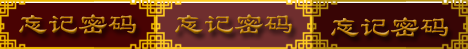
<style>
.page{position:relative;width:468px;height:49px}
.page>*{position:absolute;margin:0}
.t1{font:30px "LiSu"}
</style>
<div class="page">
<p class="t1" style="left:19px;top:14px;width:118px;height:20px">忘记密码</p>
<p class="t1" style="left:175px;top:14px;width:118px;height:20px">忘记密码</p>
<p class="t1" style="left:331px;top:17px;width:118px;height:20px">忘记密码</p>
</div>
